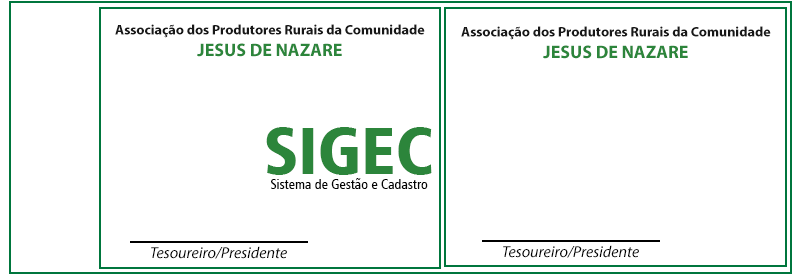
<style>
.page{position:relative;width:800px;height:277px;background:#ffffff}
.page>*{position:absolute;margin:0}
.t1{font:14px "MyriadPro-Bold";color:#181818}
.t2{font:18px "MyriadPro-Bold";color:#2c853b;text-transform:uppercase}
.t3{font:66.9px "Humanist777BT-BlackCondensedB";color:#2c853b}
.t4{font:14px "Humanist777BT-RomanCondensedB";color:#030303}
.t5{font:16px "MyriadPro-It";color:#000000}
</style>
<div class="page">
<p class="t1" style="left:115px;top:24px;width:310px;height:33px;text-align:center">Associação dos Produtores Rurais da Comunidade<br><span class="t2">Jesus de Nazare</span></p>
<p class="t1" style="left:461px;top:26px;width:310px;height:33px;text-align:center">Associação dos Produtores Rurais da Comunidade<br><span class="t2">Jesus de Nazare</span></p>
<p class="t3" style="left:266px;top:127px;width:166px;height:48px">SIGEC</p>
<p class="t4" style="left:271px;top:178px;width:157px;height:11px">Sistema de Gestão e Cadastro</p>
<p class="t5" style="left:151px;top:246px;width:136px;height:13px">Tesoureiro/Presidente</p>
<p class="t5" style="left:503px;top:245px;width:136px;height:13px">Tesoureiro/Presidente</p>
</div>
